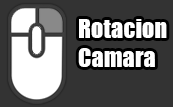
<style>
.page{position:relative;width:173px;height:107px;background:#333333}
.page>*{position:absolute;margin:0}
.t1{font:24.4px "Impact";color:#ffffff}
</style>
<div class="page">
<p class="t1" style="left:78px;top:19px;width:89px;height:48px">Rotacion<br>Camara</p>
</div>
